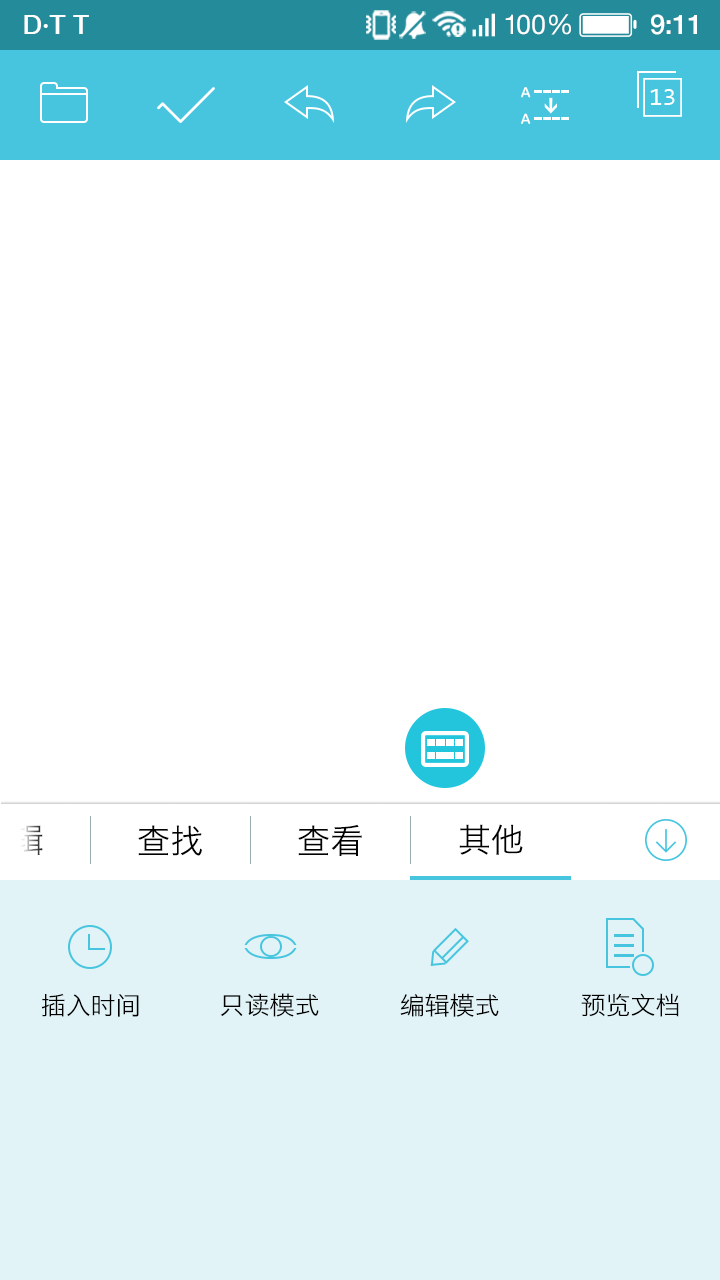
<style>
.page{position:relative;width:720px;height:1280px;background:#ffffff}
.page>*{position:absolute;margin:0}
.t1{font:27.3px "HelveticaNeue-Medium";color:#ffffff}
.t2{font:27.3px "HelveticaNeue";letter-spacing:-0.1em;color:#ffffff}
.t3{font:27.3px "HelveticaNeue";color:#ffffff}
.t4{font:27.3px "HelveticaNeue";letter-spacing:-0.25em;color:#ffffff}
.t5{font:25px "Consolas";color:#ffffff}
.t6{font:33.3px "HiraginoSansGB-W3";color:#000000}
.t7{font:25px "HiraginoSansGB-W3";color:#000000}
</style>
<div class="page">
<p class="t1" style="left:24px;top:15px;width:65px;height:19px">D·T T</p>
<p class="t2" style="left:505px;top:14px;width:66px;height:21px">1<span class="t3">0</span><span class="t4">0 </span>%</p>
<p class="t1" style="left:651px;top:14px;width:46px;height:21px">9:11</p>
<p class="t5" style="left:650px;top:89px;width:25px;height:16px">13</p>
<p class="t6" style="left:138px;top:825px;width:64px;height:31px">查找</p>
<p class="t6" style="left:298px;top:824px;width:64px;height:32px">查看</p>
<p class="t6" style="left:459px;top:824px;width:64px;height:31px">其他</p>
<p class="t7" style="left:41px;top:993px;width:98px;height:24px">插入时间</p>
<p class="t7" style="left:220px;top:993px;width:99px;height:24px">只读模式</p>
<p class="t7" style="left:400px;top:993px;width:99px;height:24px">编辑模式</p>
<p class="t7" style="left:581px;top:993px;width:98px;height:24px">预览文档</p>
</div>
